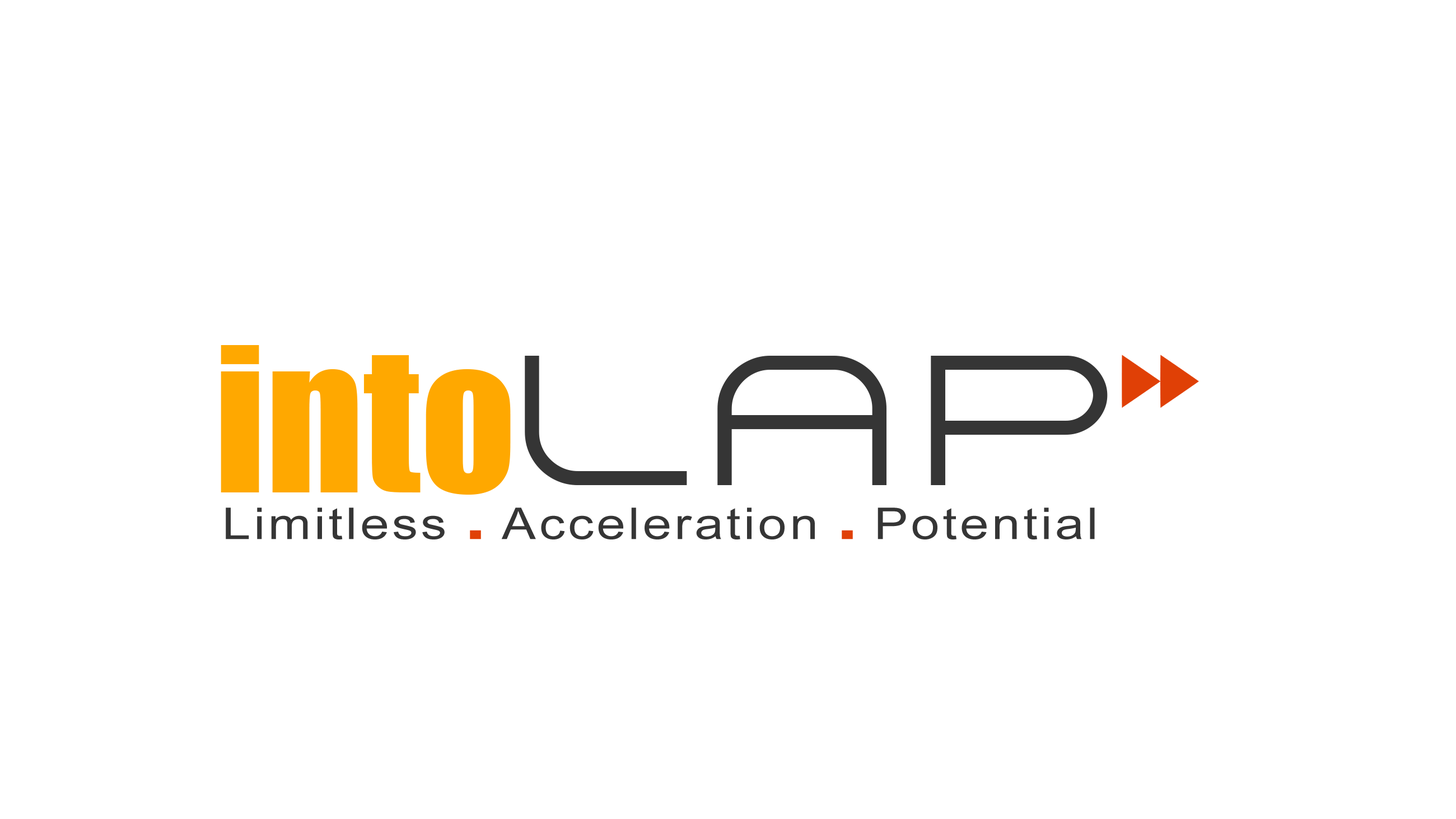
<style>
.page{position:relative;width:1456px;height:819px;background:#ffffff}
.page>*{position:absolute;margin:0}
.t1{font:186.6px "Impact";color:#ffa800}
.t2{font:186.6px "Arkitech-Light";color:#353535}
.t3{font:43.6px "ArialMT";letter-spacing:0.06em;color:#353535;scale:1.18 1}
.t4{font:43.6px "Arial-Black";letter-spacing:0.06em;color:#e04006;scale:1.18 1}
</style>
<div class="page">
<p class="t1" style="left:221px;top:345px;width:290px;height:150px">into</p>
<p class="t2" style="left:525px;top:356px;width:583px;height:129px">LAP</p>
<p class="t3" style="left:226px;top:507px;width:869px;height:32px">Limitless <span class="t4">. </span>Acceleration <span class="t4">. </span>Potential</p>
</div>
